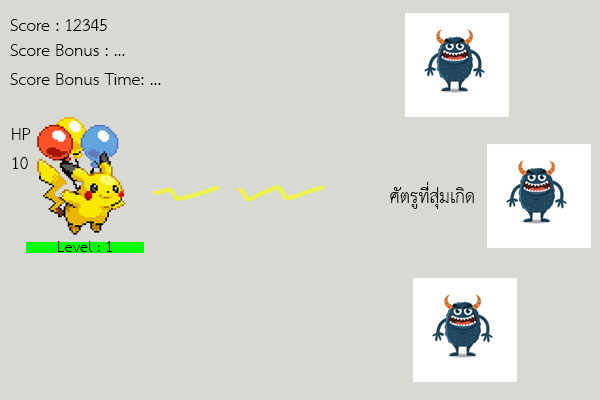
<style>
.page{position:relative;width:600px;height:400px;background:#d9d9d3}
.page>*{position:absolute;margin:0}
.t1{font:24px "THSarabunNew";color:#000000}
.t2{font:26px "THSarabunNew";color:#000000}
.t3{font:21.6px "THSarabunNew";color:#000000}
</style>
<div class="page">
<p class="t1" style="left:10px;top:19px;width:97px;height:12px">Score : 12345</p>
<p class="t1" style="left:10px;top:44px;width:151px;height:41px">Score Bonus : ...<br>Score Bonus Time: ...</p>
<p class="t1" style="left:12px;top:128px;width:19px;height:41px">HP<br>10</p>
<p class="t2" style="left:390px;top:182px;width:84px;height:27px">ศัตรูที่สุ่มเกิด</p>
<p class="t3" style="left:58px;top:241px;width:54px;height:11px">Level : 1</p>
</div>
